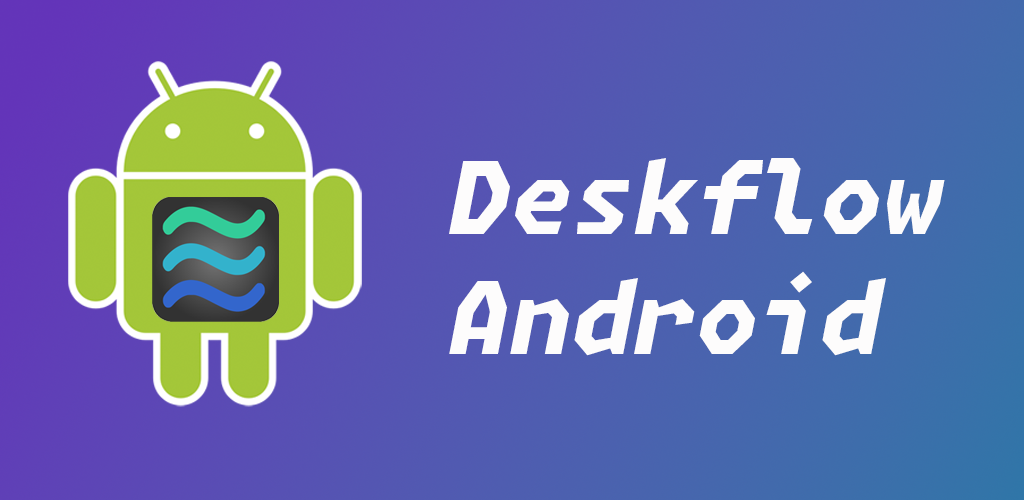
<style>
.page{position:relative;width:1024px;height:500px}
.page>*{position:absolute;margin:0}
.t1{font:100px "MonaspaceKrypton-ExtraBoldItalic";color:#fdfcfc}
</style>
<div class="page">
<p class="t1" style="left:449px;top:158px;width:496px;height:198px">Deskflow<br>Android</p>
</div>
